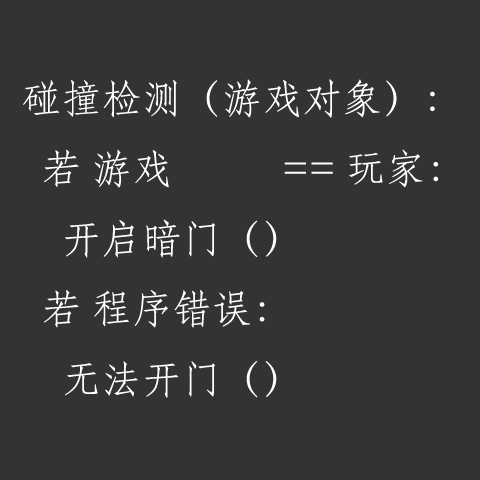
<style>
.page{position:relative;width:480px;height:480px;background:#333333}
.page>*{position:absolute;margin:0}
.t1{font:40.1px "STFangsong";color:#ffffff}
</style>
<div class="page">
<p class="t1" style="left:23px;top:79px;width:416px;height:319px">碰撞检测（游戏对象）：<br>  若 游戏           == 玩家：<br>    开启暗门（）<br>  若 程序错误：<br>    无法开门（）</p>
</div>
